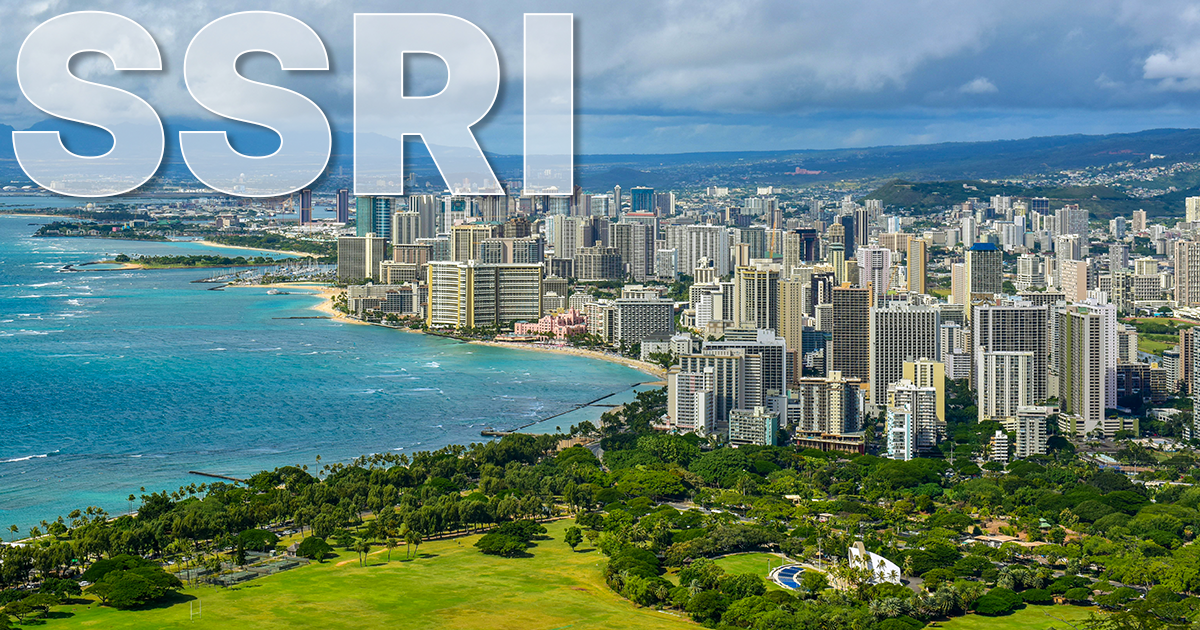
<style>
.page{position:relative;width:1200px;height:630px}
.page>*{position:absolute;margin:0}
.t1{font:250px "Inter-Black"}
</style>
<div class="page">
<p class="t1" style="left:12px;top:10px;width:562px;height:188px">SSRI</p>
</div>
